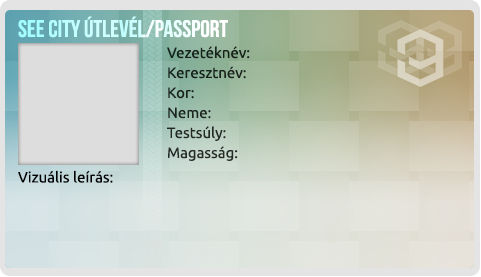
<style>
.page{position:relative;width:481px;height:277px}
.page>*{position:absolute;margin:0}
.t1{font:24px "BebasNeue"}
.t2{font:15px "Ubuntu-Regular";color:#17201a}
.t3{font:15px "Ubuntu-Regular";color:#18211b}
.t4{font:15px "Ubuntu-Regular";color:#19231e}
.t5{font:15px "Ubuntu-Regular";color:#1c2420}
.t6{font:15px "Ubuntu-Regular";color:#222825}
.t7{font:15px "Ubuntu-Regular";color:#262b28}
.t8{font:15px "Ubuntu-Regular";color:#000000}
</style>
<div class="page">
<p class="t1" style="left:18px;top:16px;width:210px;height:22px">SEE CITY ÚTLEVÉL/PASSPORT</p>
<p class="t2" style="left:167px;top:46px;width:83px;height:13px">Vezetéknév:</p>
<p class="t3" style="left:168px;top:66px;width:78px;height:13px">Keresztnév:</p>
<p class="t4" style="left:168px;top:87px;width:26px;height:12px">Kor:</p>
<p class="t5" style="left:168px;top:107px;width:43px;height:12px">Neme:</p>
<p class="t6" style="left:167px;top:126px;width:59px;height:15px">Testsúly:</p>
<p class="t7" style="left:168px;top:146px;width:70px;height:15px">Magasság:</p>
<p class="t8" style="left:18px;top:170px;width:95px;height:13px">Vizuális leírás:</p>
</div>
